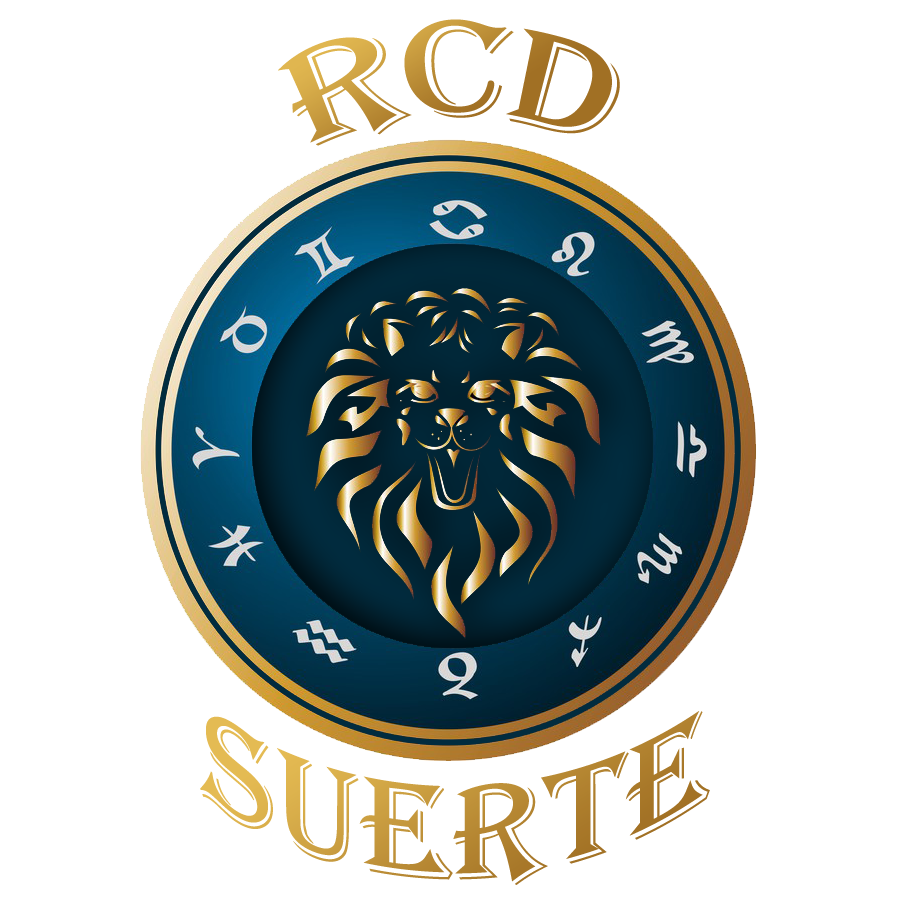
<style>
.page{position:relative;width:900px;height:900px;background:#ffffff}
.page>*{position:absolute;margin:0}
.t1{font:140px "Algerian"}
</style>
<div class="page">
<p class="t1" style="left:278px;top:19px;width:342px;height:127px">RCD</p>
<p class="t1" style="left:200px;top:711px;width:510px;height:174px">SUERTE</p>
</div>
